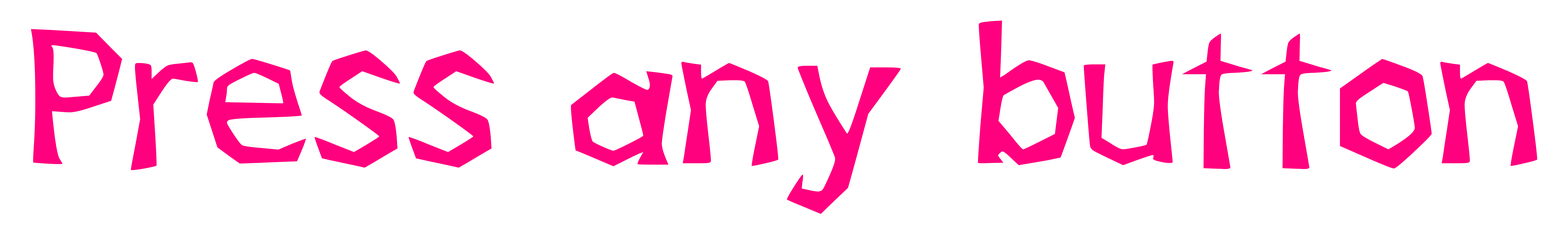
<style>
.page{position:relative;width:1568px;height:229px;background:#ffffff}
.page>*{position:absolute;margin:0}
.t1{font:273.7px "BasebrawlMain-Regular";color:#ff007f}
</style>
<div class="page">
<p class="t1" style="left:31px;top:20px;width:1506px;height:194px">Press any button</p>
</div>
